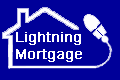
<style>
.page{position:relative;width:120px;height:80px;background:#000099}
.page>*{position:absolute;margin:0}
.t1{font:14px "ArialMT";color:#ffffff;font-weight:bold}
</style>
<div class="page">
<p class="t1" style="left:16px;top:32px;width:66px;height:30px">Lightning<br>Mortgage</p>
</div>
